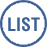
<style>
.page{position:relative;width:47px;height:47px;background:#ffffff}
.page>*{position:absolute;margin:0}
.t1{font:17.9px "HelveticaLTStd-BoldCond";color:#3b5f97}
</style>
<div class="page">
<p class="t1" style="left:8px;top:17px;width:32px;height:15px">LIST</p>
</div>
